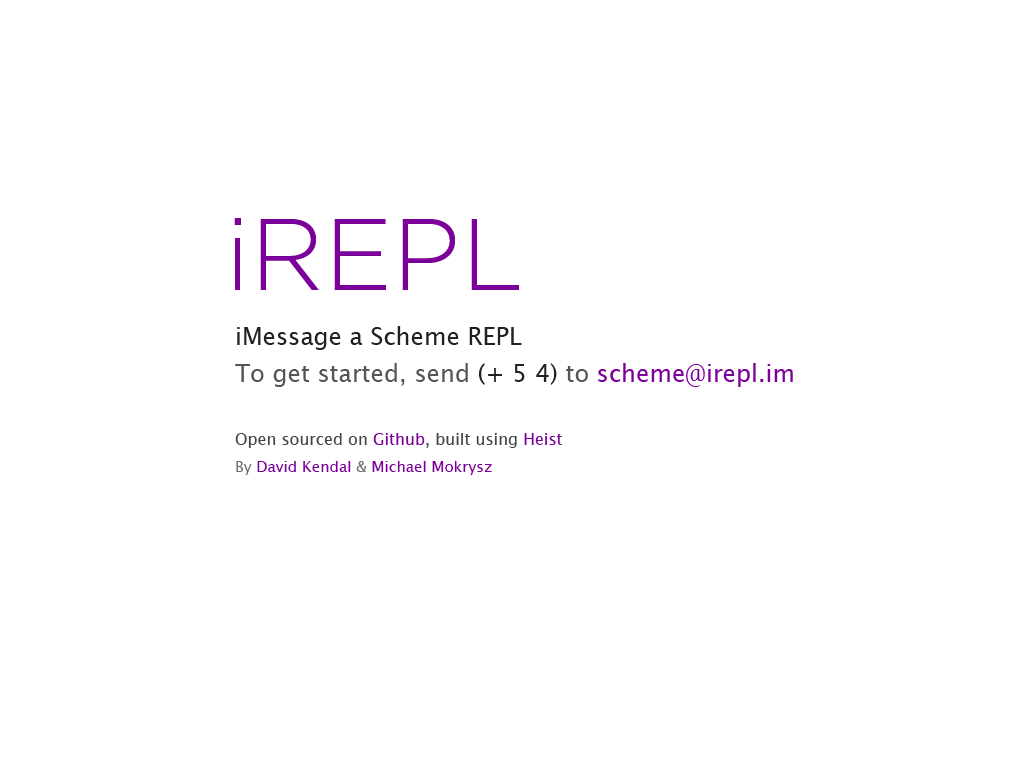
<style>
.page{position:relative;width:1024px;height:768px;background:#ffffff}
.page>*{position:absolute;margin:0}
.t1{font:102px "Gotham-Light";color:#7c009a}
.t2{font:24px/34px "LucidaGrande";color:#222222}
.t3{font:24px/34px "LucidaGrande";color:#555555}
.t4{font:24px/34px "LucidaGrande";color:#7c009a}
.t5{font:16px/24px "LucidaGrande";color:#444444}
.t6{font:16px/24px "LucidaGrande";color:#7c009a}
.t7{font:15px/24px "LucidaGrande";color:#6d6d6d}
.t8{font:15px/24px "LucidaGrande";color:#7c009a}
</style>
<div class="page">
<p class="t1" style="left:234px;top:218px;width:285px;height:72px">iREPL</p>
<p class="t2" style="left:235px;top:326px;width:558px;height:61px">iMessage a Scheme REPL<br><span class="t3">To get started, send </span>(+ 5 4)<span class="t3"> to </span><span class="t4">scheme@irepl.im</span></p>
<p class="t5" style="left:235px;top:433px;width:327px;height:42px">Open sourced on <span class="t6">Github</span>, built using <span class="t6">Heist<br></span><span class="t7">By </span><span class="t8">David Kendal</span><span class="t7"> &amp; </span><span class="t8">Michael Mokrysz</span></p>
</div>
